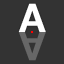
<style>
.page{position:relative;width:64px;height:64px;background:#333333}
.page>*{position:absolute;margin:0}
.t1{font:39.6px "HelveticaNeue-Bold";letter-spacing:-0.025em;color:#ffffff}
.t2{font:39.6px "HelveticaNeue-Bold";letter-spacing:-0.025em;color:#676767}
</style>
<div class="page">
<p class="t1" style="left:18px;top:3px;width:28px;height:29px">A</p>
<p class="t2" style="left:18px;top:32px;width:28px;height:29px">A</p>
</div>
